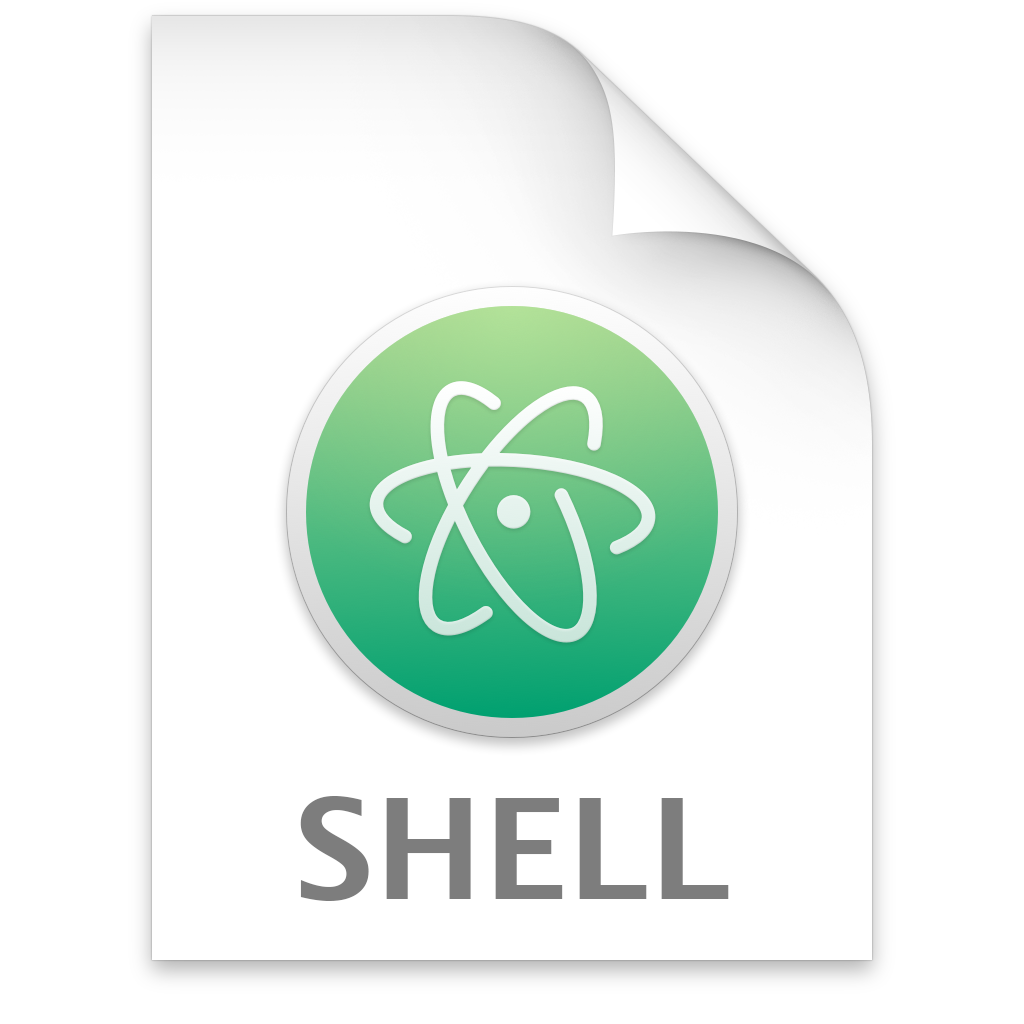
<style>
.page{position:relative;width:1024px;height:1024px;background:#ffffff}
.page>*{position:absolute;margin:0}
.t1{font:140px "LucidaGrande-Bold";color:#7d7d7d}
</style>
<div class="page">
<p class="t1" style="left:300px;top:796px;width:429px;height:105px">SHELL</p>
</div>
